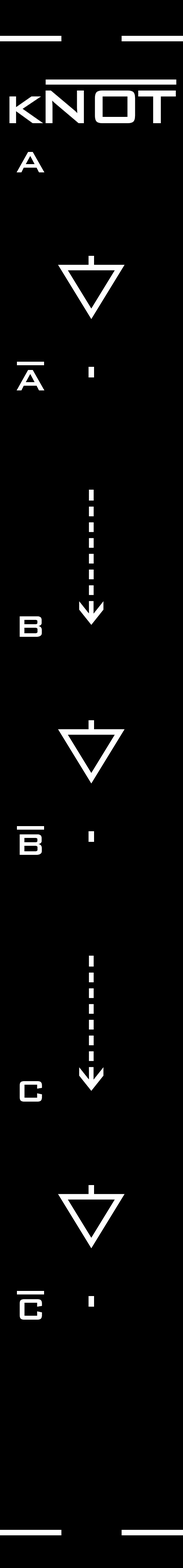
<style>
.page{position:relative;width:183px;height:1568px;background:#000000}
.page>*{position:absolute;margin:0}
.t1{font:63px "BankGothicBT-Medium";letter-spacing:-0.08em;color:#ffffff}
.t2{font:39.4px "BankGothicBT-Medium";letter-spacing:-0.06em;color:#ffffff}
</style>
<div class="page">
<p class="t1" style="left:9px;top:91px;width:167px;height:32px">kNOT</p>
<p class="t2" style="left:17px;top:152px;width:27px;height:20px">A</p>
<p class="t2" style="left:17px;top:370px;width:27px;height:20px">A</p>
<p class="t2" style="left:20px;top:616px;width:22px;height:21px">B</p>
<p class="t2" style="left:20px;top:834px;width:22px;height:21px">B</p>
<p class="t2" style="left:20px;top:1081px;width:22px;height:21px">C</p>
<p class="t2" style="left:20px;top:1299px;width:22px;height:21px">C</p>
</div>
